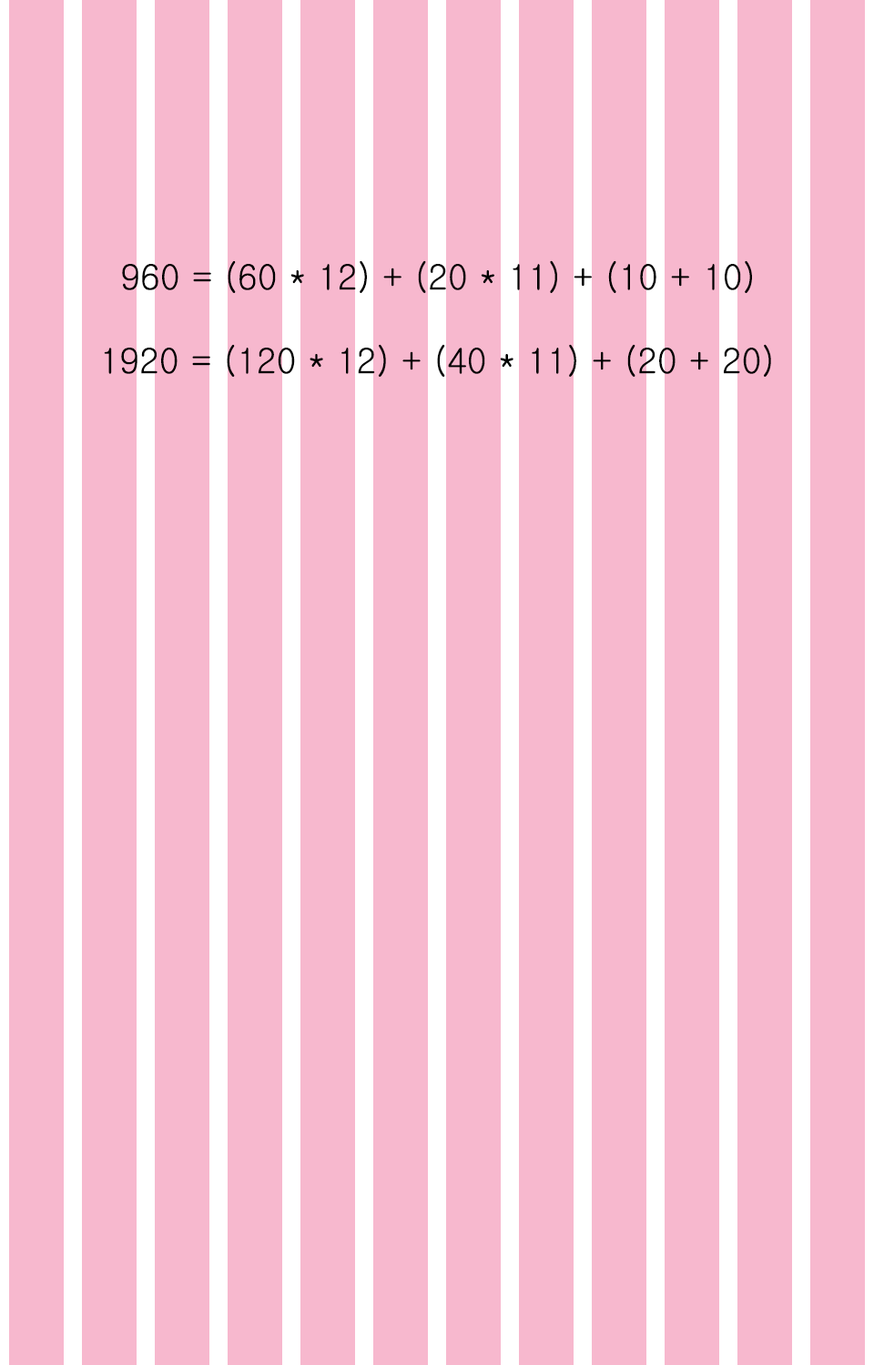
<style>
.page{position:relative;width:874px;height:1365px;background:#f7b8ce}
.page>*{position:absolute;margin:0}
.t1{font:34.6px "Gulim";color:#000000}
</style>
<div class="page">
<p class="t1" style="left:122px;top:260px;width:630px;height:33px">960 = (60 * 12) + (20 * 11) + (10 + 10)</p>
<p class="t1" style="left:104px;top:344px;width:667px;height:33px">1920 = (120 * 12) + (40 * 11) + (20 + 20)</p>
</div>
